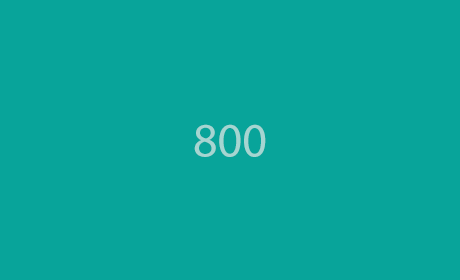
<style>
.page{position:relative;width:460px;height:280px;background:#08a49a}
.page>*{position:absolute;margin:0}
.t1{font:48px "MyriadPro-Regular";color:#a5d5d1}
</style>
<div class="page">
<p class="t1" style="left:194px;top:124px;width:72px;height:33px">800</p>
</div>
